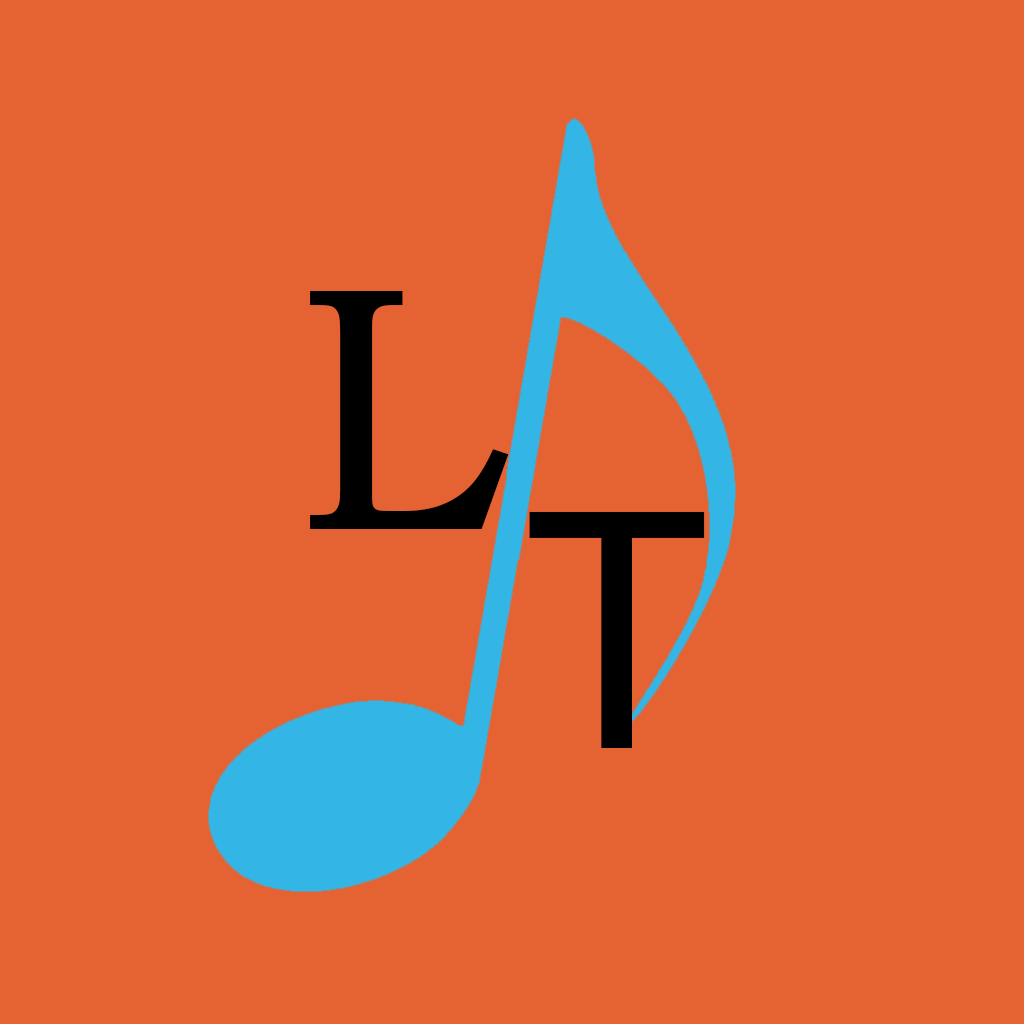
<style>
.page{position:relative;width:1024px;height:1024px;background:#e56333}
.page>*{position:absolute;margin:0}
.t1{font:350px "BookmanOldStyle";color:#000000}
.t2{font:350px "MyriadPro-Regular";color:#000000}
</style>
<div class="page">
<p class="t1" style="left:310px;top:291px;width:199px;height:238px">L</p>
<p class="t2" style="left:529px;top:511px;width:176px;height:237px">T</p>
</div>
